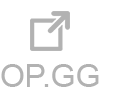
<style>
.page{position:relative;width:140px;height:100px;background:#ffffff}
.page>*{position:absolute;margin:0}
.t1{font:31.8px "ArialMT";color:#b2b2b2;text-transform:uppercase}
</style>
<div class="page">
<p class="t1" style="left:1px;top:64px;width:98px;height:23px">OP.GG</p>
</div>
